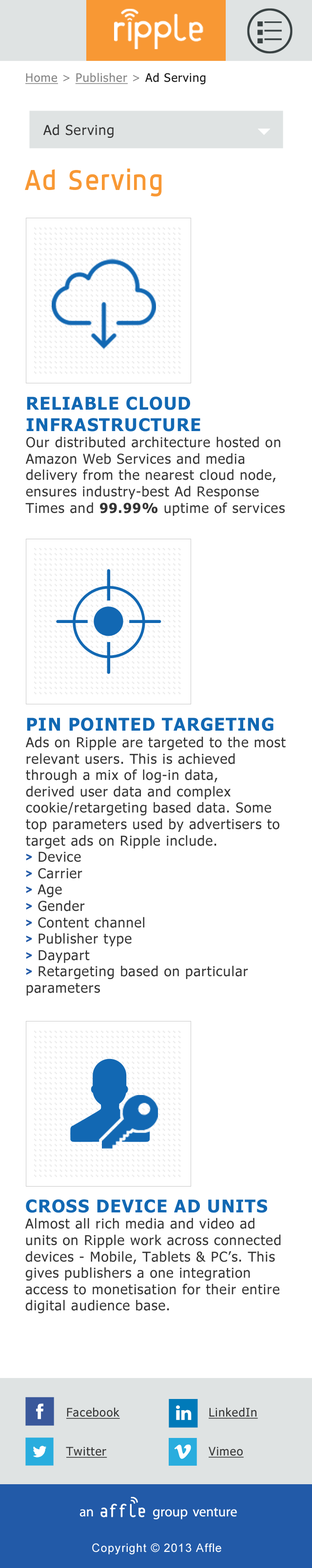
<style>
.page{position:relative;width:312px;height:1568px;background:#ffffff}
.page>*{position:absolute;margin:0}
.t1{font:11.7px "Tahoma";letter-spacing:0.05em;color:#141414}
.t2{font:11.7px "Tahoma";letter-spacing:0.05em;color:#818181;text-decoration:underline}
.t3{font:11.7px "Tahoma";letter-spacing:0.05em;color:#818181}
.t4{font:13.6px "Tahoma";letter-spacing:0.05em;color:#333333}
.t5{font:29.2px "DynoRegular";letter-spacing:0.05em;color:#f89834}
.t6{font:17.5px "Tahoma-Bold";letter-spacing:0.05em;color:#1268b3;text-transform:uppercase}
.t7{font:13.6px/11.7px "Tahoma";letter-spacing:0.05em;color:#333333}
.t8{font:13.6px "Tahoma-Bold";letter-spacing:0.05em;color:#333333}
.t9{font:13.6px "Aejo";letter-spacing:0.05em;color:#225aa8;font-weight:bold}
.t10{font:11.7px/39px "Tahoma";letter-spacing:0.05em;color:#333333;text-decoration:underline}
.t11{font:11.7px "ArialMT";letter-spacing:0.05em;color:#ffffff}
</style>
<div class="page">
<p class="t1" style="left:25px;top:73px;width:181px;height:11px"><span class="t2">Home</span><span class="t3"> &gt; </span><span class="t2">Publisher</span><span class="t3"> &gt; </span>Ad Serving</p>
<p class="t4" style="left:43px;top:124px;width:70px;height:14px">Ad Serving</p>
<p class="t5" style="left:25px;top:169px;width:137px;height:28px">Ad Serving</p>
<p class="t4" style="left:25px;top:397px;width:259px;height:119px"><span class="t6">Reliable cloud infrastructure<br></span><span class="t7">Our distribut</span>ed architecture hosted on Amazon Web Services and media delivery from the nearest cloud node, ensures industry-best Ad Response Times and <span class="t8">99.99%</span> uptime of services</p>
<p class="t4" style="left:25px;top:718px;width:260px;height:278px"><span class="t6">Pin Pointed Targeting<br></span><span class="t7">Ads on Ripple are targeted to the </span>most relevant users. This is achieved through a mix of log-in data, <br>derived user data and complex cookie/retargeting based data. Some top parameters used by advertisers to target ads on Ripple include.<br><span class="t9">&gt;</span><span class="t7"> Dev</span>ice<br><span class="t9">&gt;</span> Carrier<br><span class="t9">&gt;</span> Age<br><span class="t9">&gt;</span> Gender<br><span class="t9">&gt;</span> Content channel<br><span class="t9">&gt;</span> Publisher type<br><span class="t9">&gt;</span> Daypart<br><span class="t9">&gt;</span> Retargeting based on particular parameters</p>
<p class="t4" style="left:25px;top:1199px;width:256px;height:114px"><span class="t6">Cross Device Ad Units <br></span><span class="t7">Almost all rich media and vid</span>eo ad units on Ripple work across connected devices - Mobile, Tablets &amp; PC’s. This gives publishers a one integration access to monetisation for their entire digital audience base.</p>
<p class="t10" style="left:66px;top:1407px;width:54px;height:51px">Facebook<br>Twitter</p>
<p class="t10" style="left:208px;top:1407px;width:50px;height:51px">LinkedIn<br>Vimeo</p>
<p class="t11" style="left:92px;top:1543px;width:129px;height:11px">Copyright © 2013 Affle</p>
</div>
